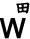
<style>
.page{position:relative;width:30px;height:39px;background:#ffffff}
.page>*{position:absolute;margin:0}
.t1{font:18px "DFKaiShu-SB-Estd-BF";color:#000000;font-weight:bold}
.t2{font:27px "ArialMT";color:#000000;font-weight:bold}
</style>
<div class="page">
<p class="t1" style="left:16px;top:2px;width:14px;height:12px">田</p>
<p class="t2" style="left:0px;top:18px;width:26px;height:21px">W</p>
</div>
